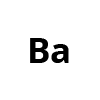
<style>
.page{position:relative;width:100px;height:100px;background:#ffffff}
.page>*{position:absolute;margin:0}
.t1{font:35px "OpenSans-Bold";color:#000000}
</style>
<div class="page">
<p class="t1" style="left:30px;top:38px;width:39px;height:25px">Ba</p>
</div>
